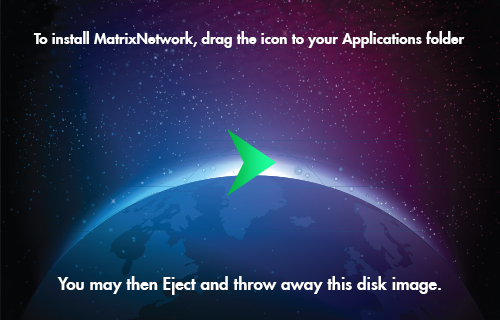
<style>
.page{position:relative;width:500px;height:320px}
.page>*{position:absolute;margin:0}
.t1{font:15px "FuturaLT-Heavy";color:#ffffff}
.t2{font:16.9px "FuturaLT-Heavy";color:#ffffff}
</style>
<div class="page">
<p class="t1" style="left:33px;top:31px;width:432px;height:17px">To install MatrixNetwork, drag the icon to your Applications folder</p>
<p class="t2" style="left:57px;top:276px;width:384px;height:19px">You may then Eject and throw away this disk image.</p>
</div>
